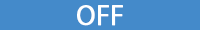
<style>
.page{position:relative;width:200px;height:30px;background:#448aca}
.page>*{position:absolute;margin:0}
.t1{font:26px "KozGoPr6N-Regular";color:#ffffff;font-weight:bold}
</style>
<div class="page">
<p class="t1" style="left:77px;top:5px;width:46px;height:21px">OFF</p>
</div>
